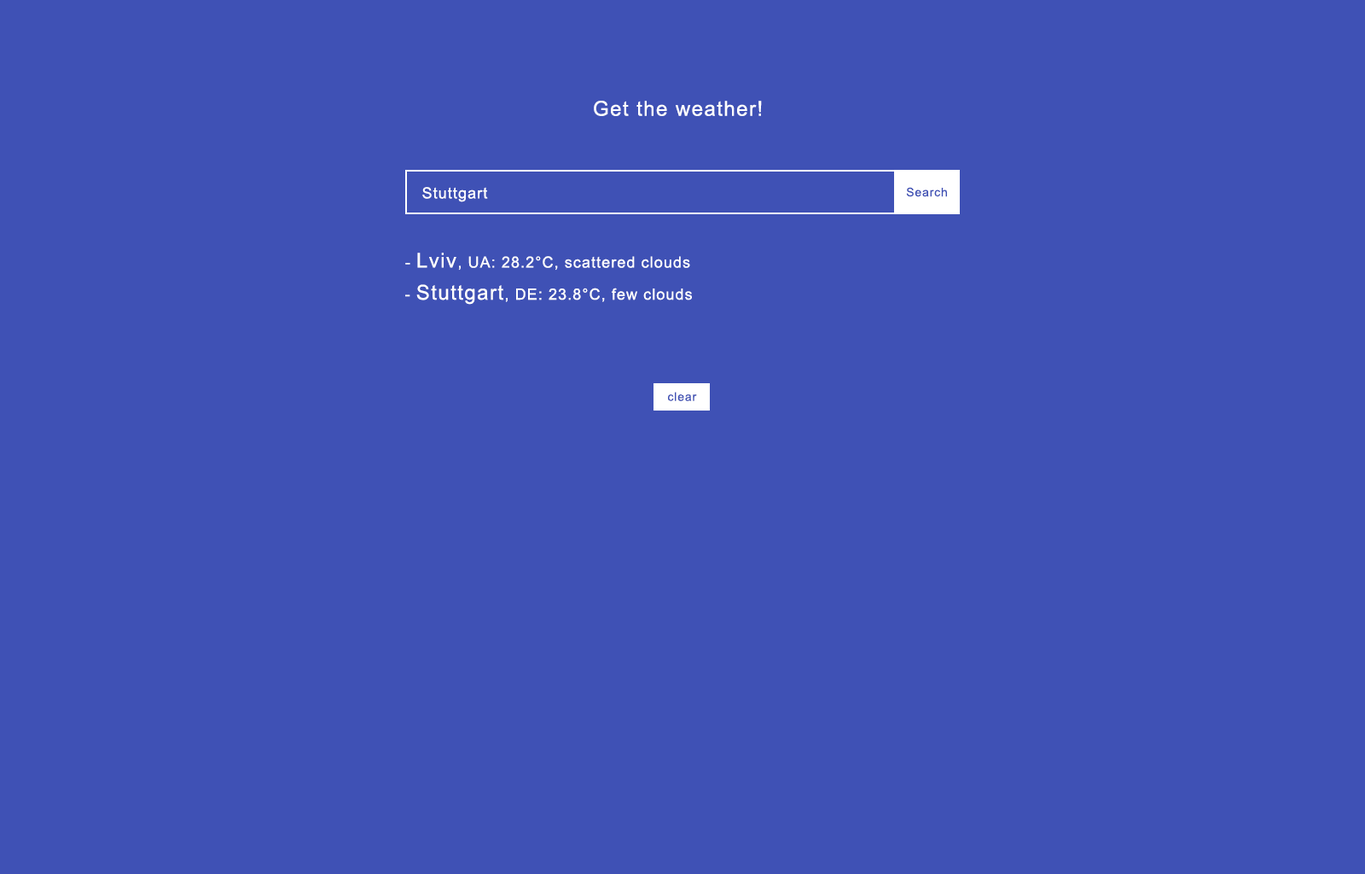
<style>
.page{position:relative;width:1365px;height:874px;background:#3f51b5}
.page>*{position:absolute;margin:0}
.t1{font:20.5px "ArialMT";letter-spacing:0.06em;color:#ffffff}
.t2{font:15.4px "ArialMT";letter-spacing:0.06em;color:#ffffff}
.t3{font:11.9px "ArialMT";letter-spacing:0.06em;color:#3f51b5}
</style>
<div class="page">
<p class="t1" style="left:594px;top:101px;width:168px;height:15px">Get the weather!</p>
<p class="t2" style="left:422px;top:187px;width:66px;height:15px">Stuttgart</p>
<p class="t3" style="left:906px;top:187px;width:41px;height:10px">Search</p>
<p class="t2" style="left:405px;top:253px;width:285px;height:17px">- <span class="t1">Lviv</span>, UA: 28.2°С, scattered clouds</p>
<p class="t2" style="left:405px;top:284px;width:287px;height:21px">- <span class="t1">Stuttgart</span>, DE: 23.8°С, few clouds</p>
<p class="t3" style="left:668px;top:392px;width:29px;height:9px">clear</p>
</div>
